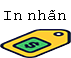
<style>
.page{position:relative;width:71px;height:58px;background:#ffffff}
.page>*{position:absolute;margin:0}
.t1{font:16px "CourierNewPSMT";color:#000000}
</style>
<div class="page">
<p class="t1" style="left:4px;top:10px;width:62px;height:10px">In nhãn</p>
</div>
